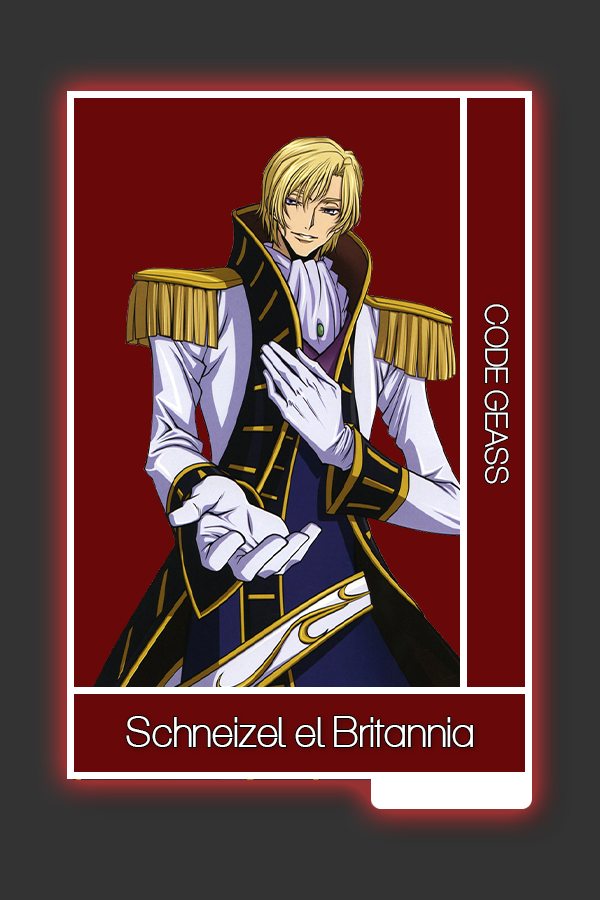
<style>
.page{position:relative;width:600px;height:900px;background:#680808}
.page>*{position:absolute;margin:0}
.t1{font:31.2px "Aliquam";color:#ffffff}
.t2{font:43.2px "Aliquam";color:#ffffff}
</style>
<div class="page">
<p class="t1" style="left:484px;top:304px;width:25px;height:180px;rotate:90deg">CODE GEASS</p>
<p class="t2" style="left:126px;top:716px;width:347px;height:31px">Schneizel el Britannia</p>
</div>
